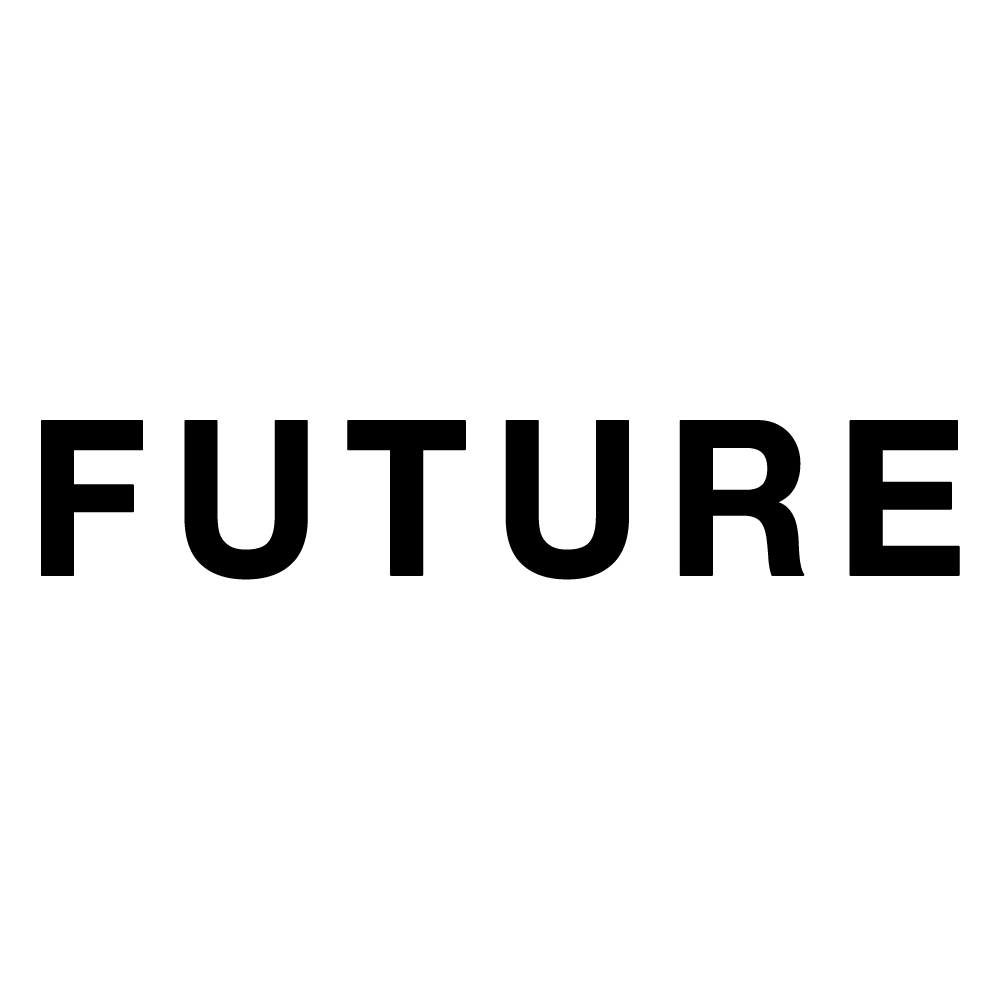
<style>
.page{position:relative;width:1000px;height:1000px;background:#ffffff}
.page>*{position:absolute;margin:0}
.t1{font:216px "HelveticaNeue-Bold";letter-spacing:0.1em;color:#000000;text-transform:uppercase;font-weight:bold;scale:0.93 1}
</style>
<div class="page">
<p class="t1" style="left:41px;top:420px;width:919px;height:160px">Future</p>
</div>
